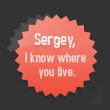
<style>
.page{position:relative;width:110px;height:110px;background:#333333}
.page>*{position:absolute;margin:0}
.t1{font:18px "AccidentalPresidency";color:#fde8e6}
.t2{font:14px/14px "AccidentalPresidency";letter-spacing:0.005em;color:#fee9e9}
</style>
<div class="page">
<p class="t1" style="left:34px;top:33px;width:42px;height:16px">Sergey,</p>
<p class="t2" style="left:25px;top:52px;width:61px;height:27px;text-align:center;opacity:0.85">I know where <br>you live.</p>
</div>
